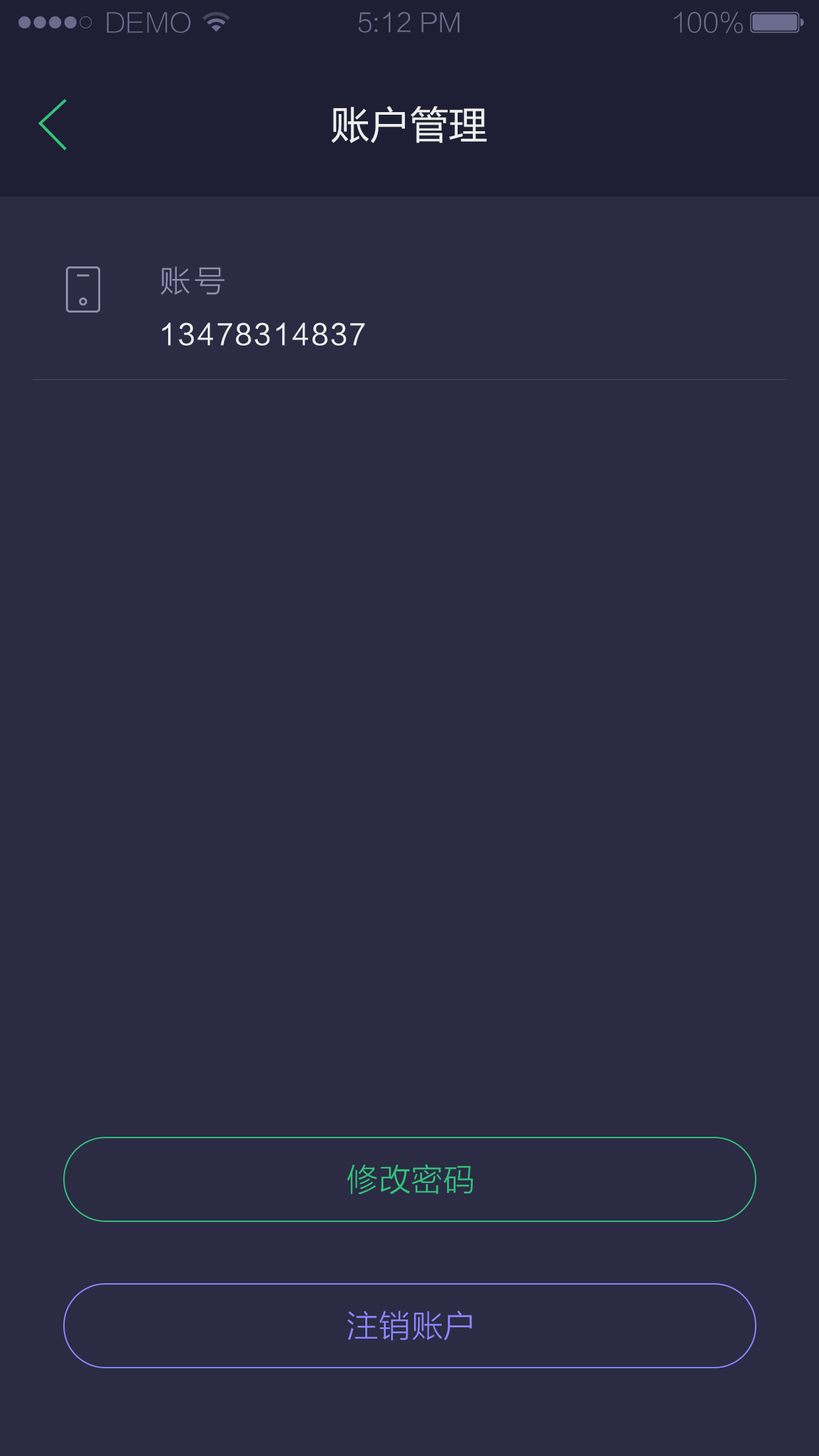
<style>
.page{position:relative;width:819px;height:1456px;background:#2b2b44}
.page>*{position:absolute;margin:0}
.t1{font:26.2px "FZLTXHK--GBK1-0";color:#6b6b8d;text-transform:uppercase}
.t2{font:26.2px "FZLTXHK";color:#6b6b8d}
.t3{font:26.2px "FZLTXHK--GBK1-0";color:#6b6b8d}
.t4{font:39.3px "FZLTHJW--GB1-0";color:#eeeeee;text-transform:uppercase}
.t5{font:31.7px "FZLTXHK";letter-spacing:0.1em;color:#908fae}
.t6{font:28.2px "FZLTHJW--GB1-0";letter-spacing:0.065em;color:#eeeeee}
.t7{font:32.3px "FZLTXHK";color:#31c27c}
.t8{font:32.3px "FZLTXHK";color:#8c88ff}
</style>
<div class="page">
<p class="t1" style="left:107px;top:12px;width:84px;height:21px">demo</p>
<p class="t2" style="left:358px;top:12px;width:102px;height:21px">5:12 PM</p>
<p class="t3" style="left:674px;top:11px;width:69px;height:23px">100%</p>
<p class="t4" style="left:331px;top:106px;width:156px;height:37px">账户管理</p>
<p class="t5" style="left:160px;top:266px;width:65px;height:29px">账号</p>
<p class="t6" style="left:162px;top:322px;width:203px;height:24px">13478314837</p>
<p class="t7" style="left:347px;top:1164px;width:126px;height:30px">修改密码</p>
<p class="t8" style="left:348px;top:1310px;width:124px;height:31px">注销账户</p>
</div>
